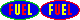
<style>
.page{position:relative;width:80px;height:20px;background:#0600e7}
.page>*{position:absolute;margin:0}
.t1{font:15px "GothamCondensed-Black";color:#f5030f}
.t2{font:15px "GothamCondensed-Black";color:#f4ff04}
</style>
<div class="page">
<p class="t1" style="left:9px;top:4px;width:23px;height:11px">F<span class="t2">U</span>E<span class="t2">L</span></p>
<p class="t2" style="left:49px;top:4px;width:23px;height:11px">F<span class="t1">U</span>E<span class="t1">L</span></p>
</div>
